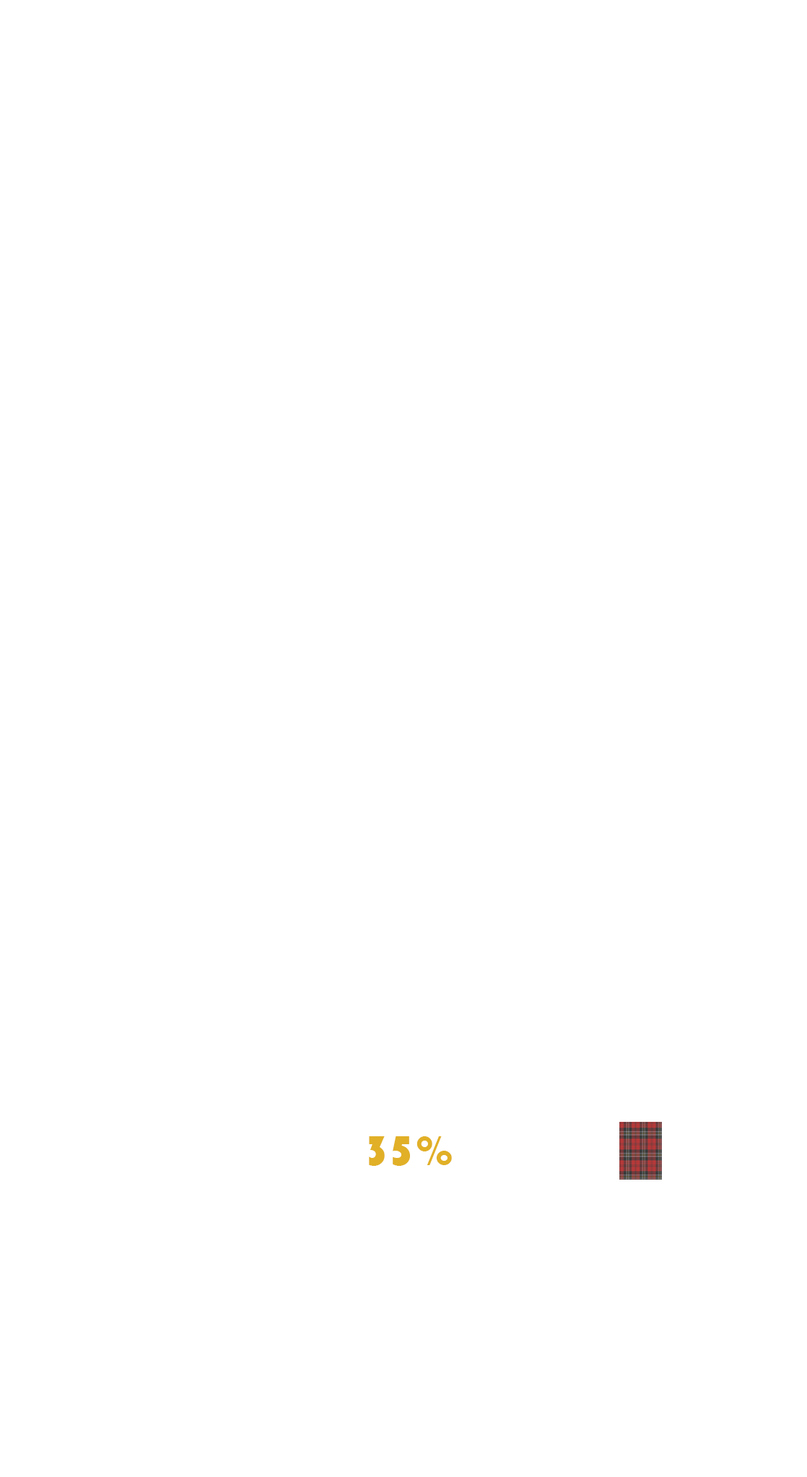
<style>
.page{position:relative;width:807px;height:1477px;background:#ffffff}
.page>*{position:absolute;margin:0}
.t1{font:43.7px "Bauhaus93";color:#e1b027}
</style>
<div class="page">
<p class="t1" style="left:369px;top:1136px;width:83px;height:30px">35%</p>
</div>
